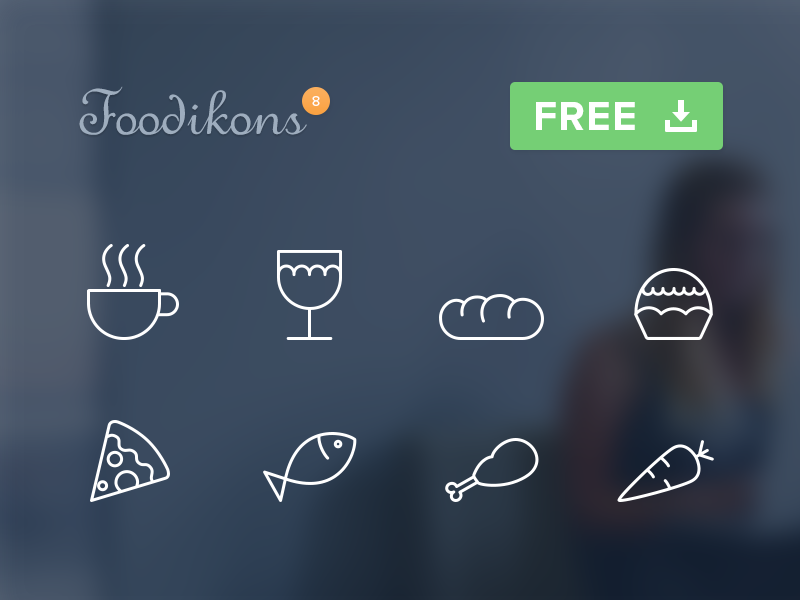
<style>
.page{position:relative;width:800px;height:600px}
.page>*{position:absolute;margin:0}
.t1{font:72px "Merveille";color:#9eadbe}
.t2{font:14px "ProximaNova-Regular";letter-spacing:0.025em;color:#ffffff}
.t3{font:42px "ProximaNova-Bold";letter-spacing:0.025em;color:#ffffff}
</style>
<div class="page">
<p class="t1" style="left:79px;top:86px;width:228px;height:49px">Foodikons</p>
<p class="t2" style="left:312px;top:96px;width:8px;height:10px">8</p>
<p class="t3" style="left:536px;top:102px;width:99px;height:28px">FREE</p>
</div>
